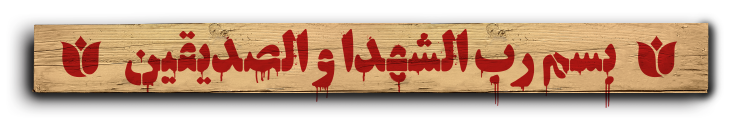
<style>
.page{position:relative;width:730px;height:130px;background:#ffffff}
.page>*{position:absolute;margin:0}
.t1{font:57.9px "TitrStancildrips";letter-spacing:-0.02em;color:#a11612}
</style>
<div class="page">
<p class="t1" style="left:125px;top:29px;width:491px;height:79px">بسم رب الشهدا و الصدیقین</p>
</div>
